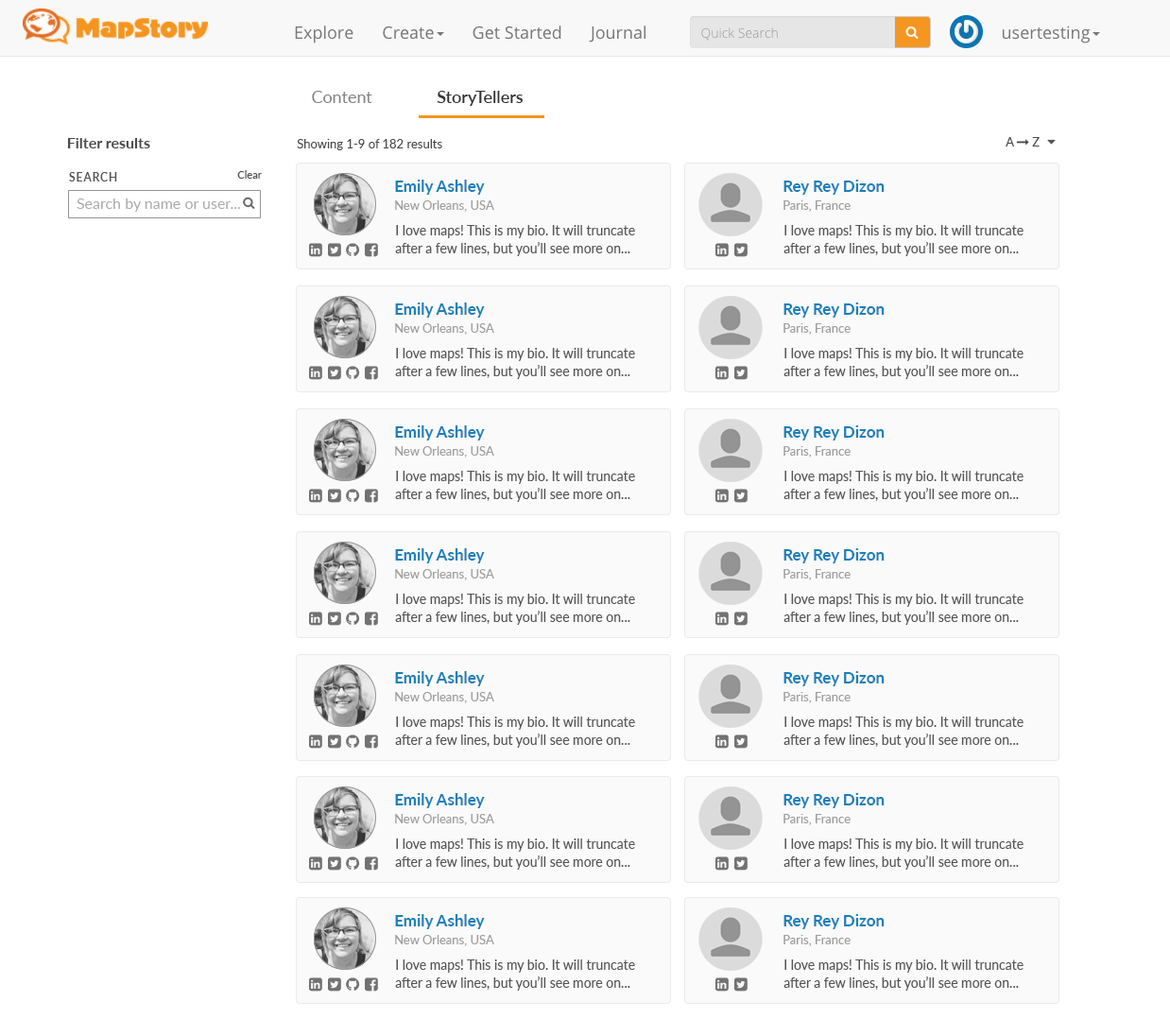
<style>
.page{position:relative;width:1170px;height:1019px;background:#ffffff}
.page>*{position:absolute;margin:0}
.t1{font:17px "Lato-Regular";color:#828282}
.t2{font:17px "Lato-Semibold";color:#333333}
.t3{font:15.1px "Lato-Bold";color:#4b4b4b}
.t4{font:12.3px "Lato-Regular";color:#4a4a4a}
.t5{font:11.3px "Lato-Semibold";letter-spacing:0.08em;color:#555555}
.t6{font:10.4px "Lato-Semibold";color:#555555}
.t7{font:16.1px "Lato-Bold";color:#1b80ba}
.t8{font:15.1px "Lato-Regular";color:#ababab}
.t9{font:12.3px "Lato-Regular";color:#9f9f9f}
.t10{font:13.2px/18px "Lato-Regular";color:#555555}
</style>
<div class="page">
<p class="t1" style="left:312px;top:91px;width:60px;height:12px">Content</p>
<p class="t2" style="left:437px;top:91px;width:86px;height:15px">StoryTellers</p>
<p class="t3" style="left:67px;top:138px;width:83px;height:10px">Filter results</p>
<p class="t4" style="left:297px;top:139px;width:145px;height:11px">Showing 1-9 of 182 results</p>
<p class="t5" style="left:69px;top:172px;width:48px;height:9px">SEARCH</p>
<p class="t6" style="left:237px;top:170px;width:25px;height:9px">Clear</p>
<p class="t7" style="left:395px;top:180px;width:90px;height:15px">Emily Ashley</p>
<p class="t7" style="left:784px;top:180px;width:101px;height:15px">Rey Rey Dizon</p>
<p class="t8" style="left:77px;top:199px;width:163px;height:13px">Search by name or user...</p>
<p class="t9" style="left:395px;top:200px;width:99px;height:12px">New Orleans, USA</p>
<p class="t9" style="left:784px;top:200px;width:67px;height:12px">Paris, France</p>
<p class="t10" style="left:395px;top:225px;width:240px;height:31px">I love maps! This is my bio. It will truncate <br>after a few lines, but you’ll see more on...</p>
<p class="t10" style="left:784px;top:225px;width:240px;height:31px">I love maps! This is my bio. It will truncate <br>after a few lines, but you’ll see more on...</p>
<p class="t7" style="left:395px;top:302px;width:90px;height:16px">Emily Ashley</p>
<p class="t7" style="left:784px;top:302px;width:101px;height:16px">Rey Rey Dizon</p>
<p class="t9" style="left:395px;top:323px;width:99px;height:12px">New Orleans, USA</p>
<p class="t9" style="left:784px;top:323px;width:67px;height:12px">Paris, France</p>
<p class="t10" style="left:395px;top:348px;width:240px;height:31px">I love maps! This is my bio. It will truncate <br>after a few lines, but you’ll see more on...</p>
<p class="t10" style="left:784px;top:348px;width:240px;height:31px">I love maps! This is my bio. It will truncate <br>after a few lines, but you’ll see more on...</p>
<p class="t7" style="left:395px;top:425px;width:90px;height:15px">Emily Ashley</p>
<p class="t7" style="left:784px;top:425px;width:101px;height:15px">Rey Rey Dizon</p>
<p class="t9" style="left:395px;top:446px;width:99px;height:12px">New Orleans, USA</p>
<p class="t9" style="left:784px;top:446px;width:67px;height:12px">Paris, France</p>
<p class="t10" style="left:395px;top:471px;width:240px;height:31px">I love maps! This is my bio. It will truncate <br>after a few lines, but you’ll see more on...</p>
<p class="t10" style="left:784px;top:471px;width:240px;height:31px">I love maps! This is my bio. It will truncate <br>after a few lines, but you’ll see more on...</p>
<p class="t7" style="left:395px;top:548px;width:90px;height:15px">Emily Ashley</p>
<p class="t7" style="left:784px;top:548px;width:101px;height:15px">Rey Rey Dizon</p>
<p class="t9" style="left:395px;top:569px;width:99px;height:11px">New Orleans, USA</p>
<p class="t9" style="left:784px;top:569px;width:67px;height:11px">Paris, France</p>
<p class="t10" style="left:395px;top:594px;width:240px;height:31px">I love maps! This is my bio. It will truncate <br>after a few lines, but you’ll see more on...</p>
<p class="t10" style="left:784px;top:594px;width:240px;height:31px">I love maps! This is my bio. It will truncate <br>after a few lines, but you’ll see more on...</p>
<p class="t7" style="left:395px;top:671px;width:90px;height:15px">Emily Ashley</p>
<p class="t7" style="left:784px;top:671px;width:101px;height:15px">Rey Rey Dizon</p>
<p class="t9" style="left:395px;top:692px;width:99px;height:11px">New Orleans, USA</p>
<p class="t9" style="left:784px;top:692px;width:67px;height:11px">Paris, France</p>
<p class="t10" style="left:395px;top:717px;width:240px;height:31px">I love maps! This is my bio. It will truncate <br>after a few lines, but you’ll see more on...</p>
<p class="t10" style="left:784px;top:717px;width:240px;height:31px">I love maps! This is my bio. It will truncate <br>after a few lines, but you’ll see more on...</p>
<p class="t7" style="left:395px;top:793px;width:90px;height:15px">Emily Ashley</p>
<p class="t7" style="left:784px;top:793px;width:101px;height:15px">Rey Rey Dizon</p>
<p class="t9" style="left:395px;top:814px;width:99px;height:11px">New Orleans, USA</p>
<p class="t9" style="left:784px;top:814px;width:67px;height:11px">Paris, France</p>
<p class="t10" style="left:395px;top:838px;width:240px;height:32px">I love maps! This is my bio. It will truncate <br>after a few lines, but you’ll see more on...</p>
<p class="t10" style="left:784px;top:838px;width:240px;height:32px">I love maps! This is my bio. It will truncate <br>after a few lines, but you’ll see more on...</p>
<p class="t7" style="left:395px;top:914px;width:90px;height:15px">Emily Ashley</p>
<p class="t7" style="left:784px;top:914px;width:101px;height:15px">Rey Rey Dizon</p>
<p class="t9" style="left:395px;top:935px;width:99px;height:11px">New Orleans, USA</p>
<p class="t9" style="left:784px;top:935px;width:67px;height:11px">Paris, France</p>
<p class="t10" style="left:395px;top:959px;width:240px;height:32px">I love maps! This is my bio. It will truncate <br>after a few lines, but you’ll see more on...</p>
<p class="t10" style="left:784px;top:959px;width:240px;height:32px">I love maps! This is my bio. It will truncate <br>after a few lines, but you’ll see more on...</p>
</div>
